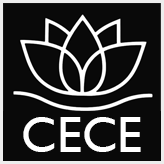
<style>
.page{position:relative;width:164px;height:164px;background:#090909}
.page>*{position:absolute;margin:0}
.t1{font:50.3px "GillSansMT";color:#ffffff}
</style>
<div class="page">
<p class="t1" style="left:23px;top:117px;width:118px;height:35px">CECE</p>
</div>
